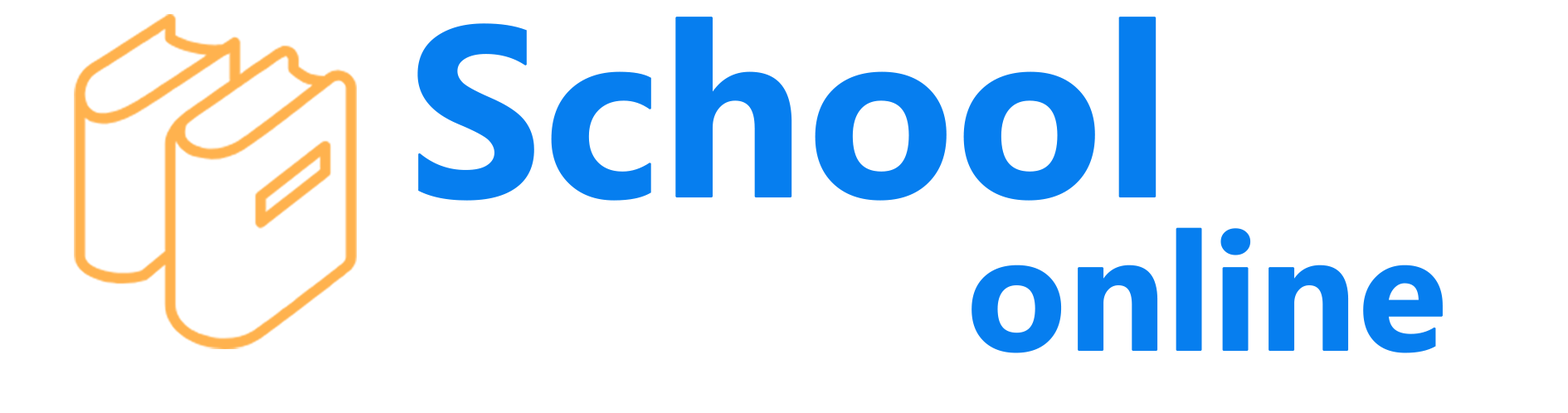
<style>
.page{position:relative;width:1568px;height:413px;background:#ffffff}
.page>*{position:absolute;margin:0}
.t1{font:224.2px "MicrosoftYaHei-Bold";letter-spacing:-0.02em;color:#067eef;font-weight:bold}
.t2{font:152px "MicrosoftYaHei-Bold";letter-spacing:-0.02em;color:#067eef;font-weight:bold}
</style>
<div class="page">
<p class="t1" style="left:417px;top:17px;width:740px;height:184px">School</p>
<p class="t2" style="left:971px;top:227px;width:472px;height:126px">online</p>
</div>
